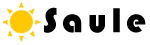
<style>
.page{position:relative;width:150px;height:45px;background:#ffffff}
.page>*{position:absolute;margin:0}
.t1{font:36px "Bauhaus93";letter-spacing:0.12em;color:#010101}
</style>
<div class="page">
<p class="t1" style="left:44px;top:7px;width:102px;height:26px">Saule</p>
</div>
